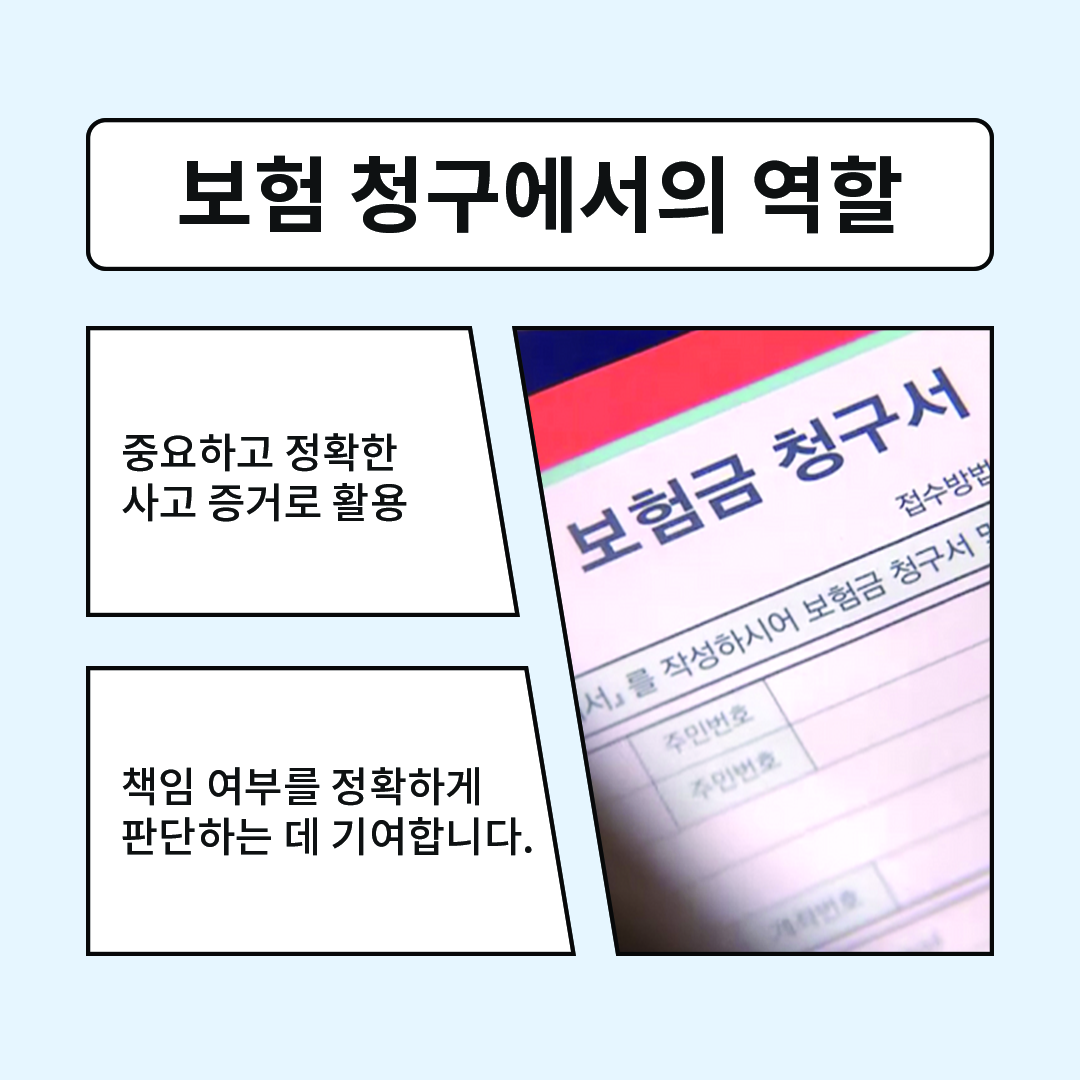
<style>
.page{position:relative;width:1080px;height:1080px;background:#e6f6ff}
.page>*{position:absolute;margin:0}
.t1{font:83.3px "NotoSansCJKkr-Bold";color:#0e1112}
.t2{font:41.7px "NotoSansCJKkr-Medium";color:#0e1112}
</style>
<div class="page">
<p class="t1" style="left:179px;top:155px;width:723px;height:79px">보험 청구에서의 역할</p>
<p class="t2" style="left:122px;top:433px;width:285px;height:89px">중요하고 정확한 <br>사고 증거로 활용</p>
<p class="t2" style="left:122px;top:767px;width:410px;height:89px">책임 여부를 정확하게<br>판단하는 데 기여합니다.</p>
</div>
